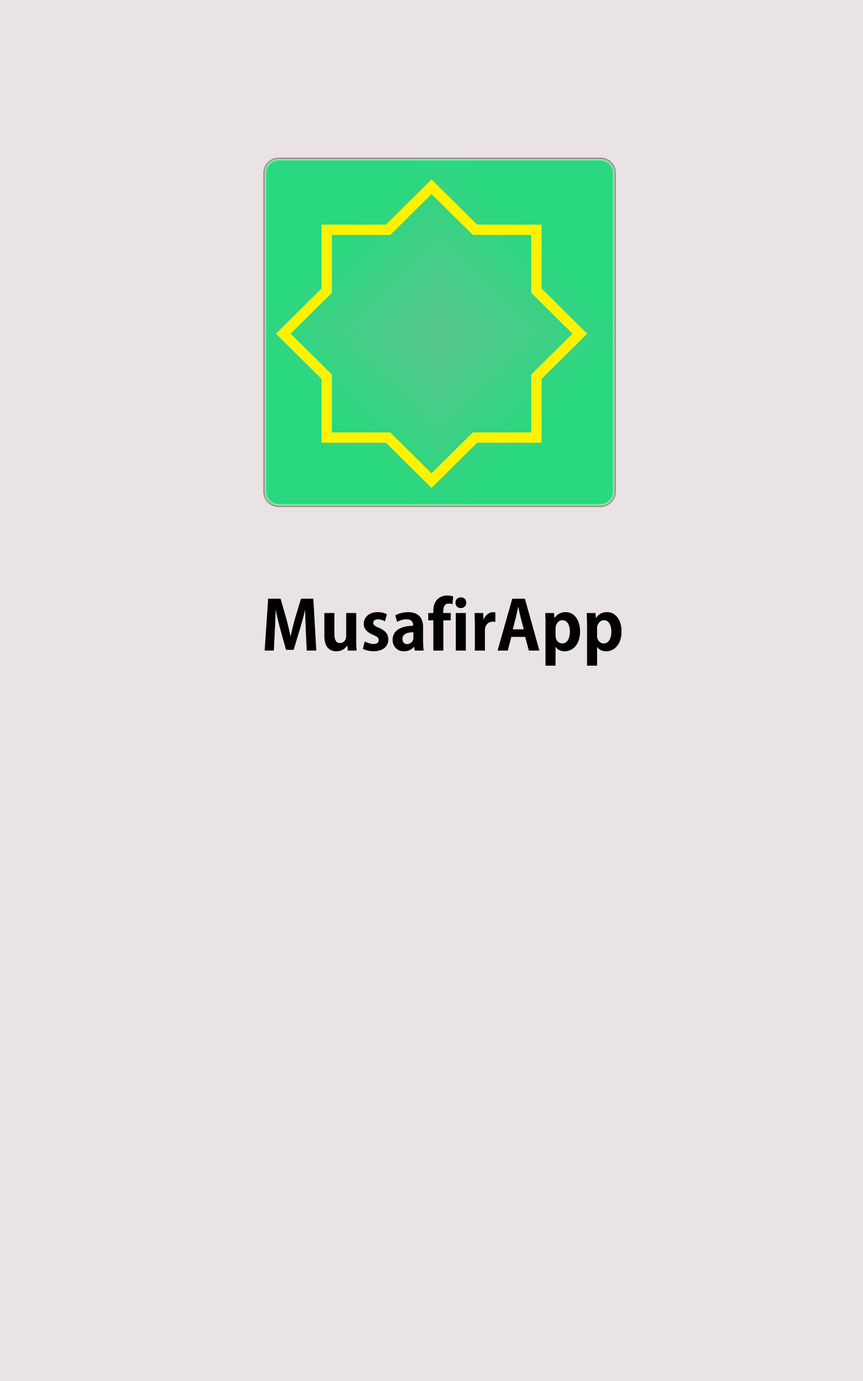
<style>
.page{position:relative;width:863px;height:1381px;background:#e9e3e3}
.page>*{position:absolute;margin:0}
.t1{font:67.4px "AdobeGothicStd-Bold";color:#000000}
</style>
<div class="page">
<p class="t1" style="left:264px;top:596px;width:358px;height:70px">MusafirApp</p>
</div>
